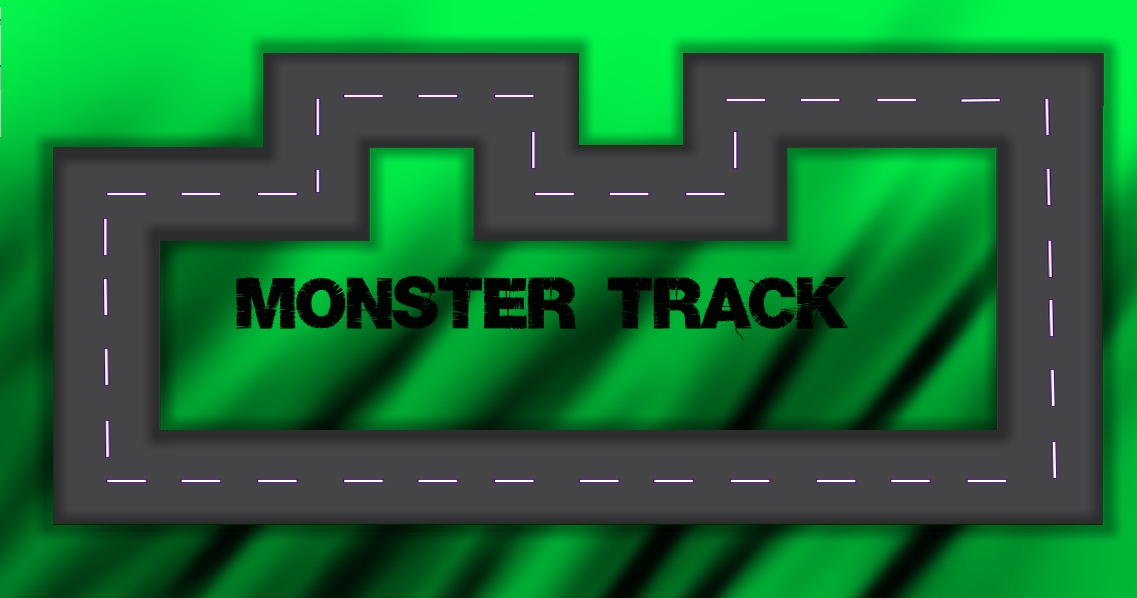
<style>
.page{position:relative;width:1137px;height:598px;background:#454548}
.page>*{position:absolute;margin:0}
.t1{font:64px "Base05";color:#000300}
</style>
<div class="page">
<p class="t1" style="left:236px;top:275px;width:613px;height:65px">MONSTER TRACK</p>
</div>
